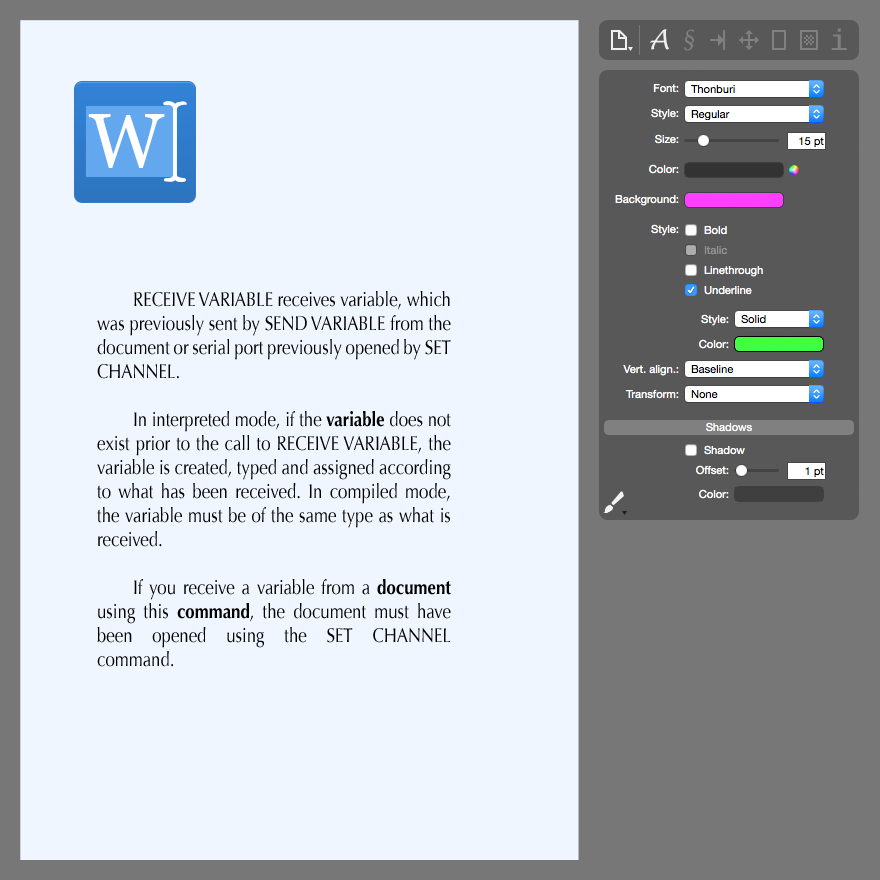
<style>
.page{position:relative;width:880px;height:880px;background:#f0f6ff}
.page>*{position:absolute;margin:0}
.t1{font:20px "Optima-Regular";color:#000000;scale:0.84 1}
.t2{font:20px "Optima-Bold";color:#000000;scale:0.84 1}
</style>
<div class="page">
<p class="t1" style="left:97px;top:291px;width:354px;height:376px;text-align:justify">RECEIVE VARIABLE receives variable, which was previously sent by SEND VARIABLE from the document or serial port previously opened by SET CHANNEL.<br><br> In interpreted mode, if the <span class="t2">variable </span>does not exist prior to the call to RECEIVE VARIABLE, the variable is created, typed and assigned according to what has been received. In compiled mode, the variable must be of the same type as what is received.<br><br> If you receive a variable from a <span class="t2">document </span>using this <span class="t2">command</span>, the document must have been opened using the SET CHANNEL command.</p>
</div>
